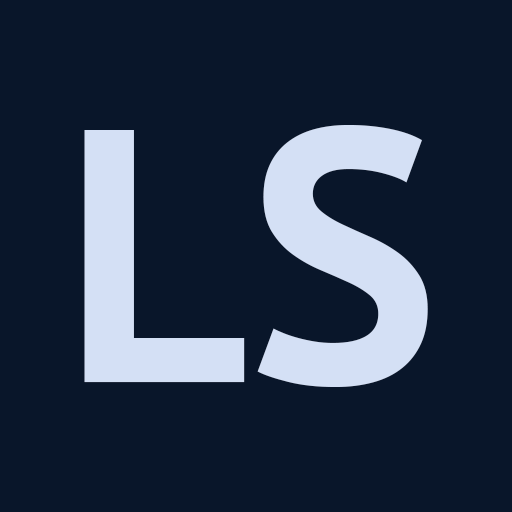
<style>
.page{position:relative;width:512px;height:512px;background:#09162a}
.page>*{position:absolute;margin:0}
.t1{font:360px "PTSans-Bold";color:#d4e0f5}
</style>
<div class="page">
<p class="t1" style="left:84px;top:125px;width:344px;height:262px">LS</p>
</div>
